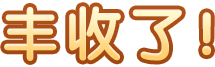
<style>
.page{position:relative;width:215px;height:67px;background:#ffffff}
.page>*{position:absolute;margin:0}
.t1{font:57.9px "FZY4JW--GB1-0";letter-spacing:0.1em}
</style>
<div class="page">
<p class="t1" style="left:4px;top:6px;width:207px;height:55px">丰收了！</p>
</div>
